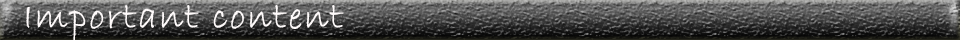
<style>
.page{position:relative;width:960px;height:40px}
.page>*{position:absolute;margin:0}
.t1{font:38.2px "BradleyHandITC";letter-spacing:0.025em;color:#fffbfb;font-weight:bold}
</style>
<div class="page">
<p class="t1" style="left:26px;top:5px;width:318px;height:35px">Important content</p>
</div>
